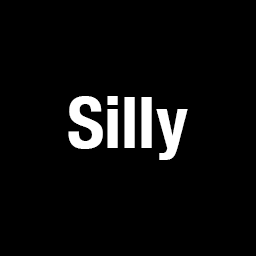
<style>
.page{position:relative;width:256px;height:256px;background:#000000}
.page>*{position:absolute;margin:0}
.t1{font:72px "HelveticaNeue-CondensedBold";color:#ffffff}
</style>
<div class="page">
<p class="t1" style="left:68px;top:96px;width:120px;height:64px">Silly</p>
</div>
